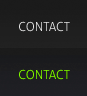
<style>
.page{position:relative;width:87px;height:96px}
.page>*{position:absolute;margin:0}
.t1{font:12.6px "Aller-Light";color:#ebe8d0}
.t2{font:12.6px "Aller-Light";color:#83f901}
</style>
<div class="page">
<p class="t1" style="left:19px;top:21px;width:51px;height:11px">CONTACT</p>
<p class="t2" style="left:19px;top:69px;width:51px;height:11px">CONTACT</p>
</div>
